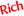
<style>
.page{position:relative;width:24px;height:16px;background:#ffffff}
.page>*{position:absolute;margin:0}
.t1{font:13.3px "AmiraParadiso";letter-spacing:-0.04em;color:#ff0000}
</style>
<div class="page">
<p class="t1" style="left:0px;top:0px;width:24px;height:15px;rotate:-13deg">Rich</p>
</div>
